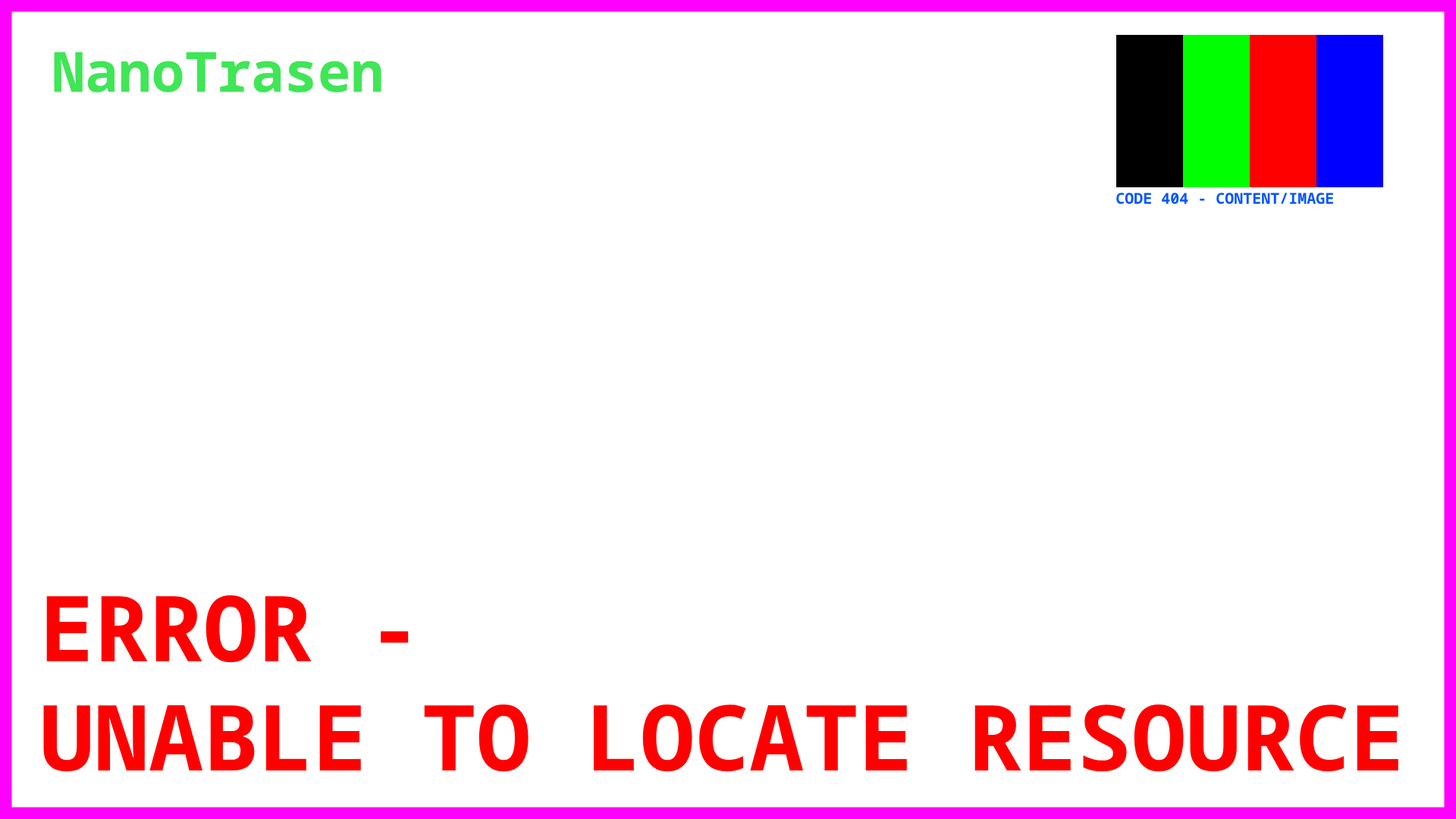
<style>
.page{position:relative;width:1456px;height:819px;background:#ffffff}
.page>*{position:absolute;margin:0}
.t1{font:55.4px "NotoSansMono-Bold";color:#3fe656}
.t2{font:15.2px "NotoSansMono-Bold";color:#0054ff}
.t3{font:91px "NotoSansMono-Bold";color:#ff0000}
</style>
<div class="page">
<p class="t1" style="left:54px;top:52px;width:327px;height:41px">NanoTrasen</p>
<p class="t2" style="left:1116px;top:193px;width:217px;height:11px">CODE 404 - CONTENT/IMAGE</p>
<p class="t3" style="left:43px;top:595px;width:1355px;height:177px">ERROR - <br>UNABLE TO LOCATE RESOURCE</p>
</div>
